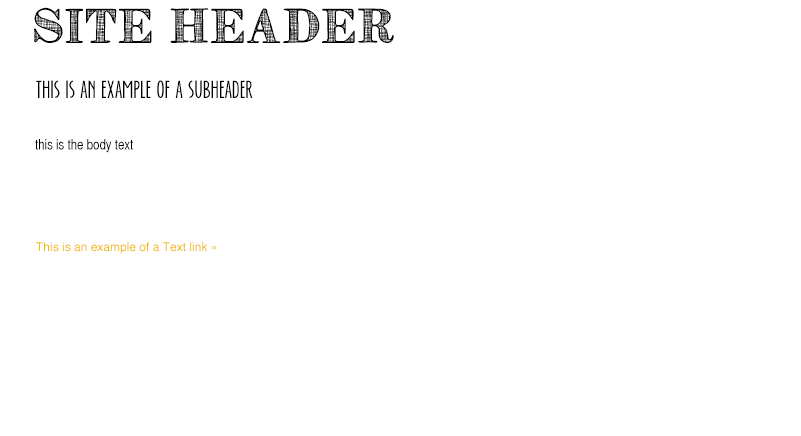
<style>
.page{position:relative;width:801px;height:436px;background:#ffffff}
.page>*{position:absolute;margin:0}
.t1{font:32px "Ornistetfb";color:#000000}
.t2{font:24px "EverAfter";color:#000000}
.t3{font:14px "HelveticaCYPlain";color:#000000}
.t4{font:12px "Helvetica";color:#f1b90d}
</style>
<div class="page">
<p class="t1" style="left:34px;top:7px;width:360px;height:36px">Site Header</p>
<p class="t2" style="left:36px;top:80px;width:217px;height:18px">this is an example of a subheader</p>
<p class="t3" style="left:35px;top:139px;width:98px;height:14px">this is the body text</p>
<p class="t4" style="left:36px;top:242px;width:181px;height:12px">This is an example of a Text link »</p>
</div>
